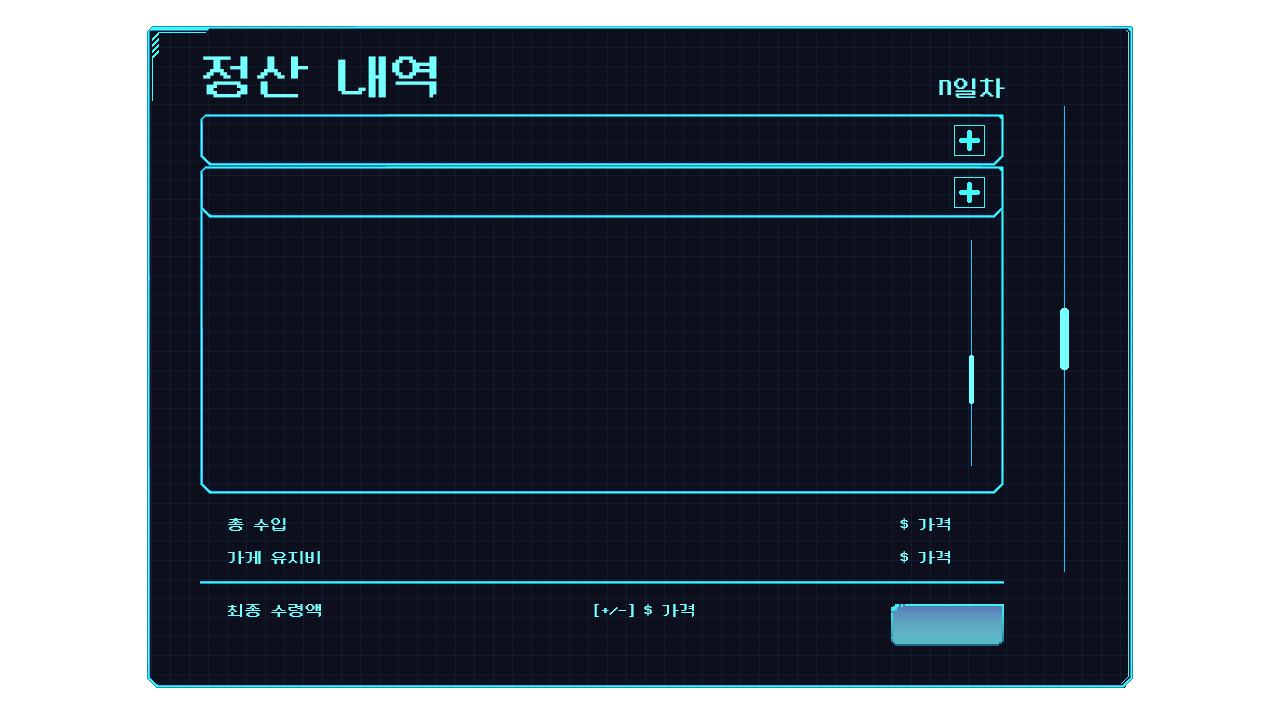
<style>
.page{position:relative;width:1280px;height:720px;background:#0d0f1d}
.page>*{position:absolute;margin:0}
.t1{font:50px "NeoDunggeunmo-Regular";color:#75fffe;scale:1.08 1}
.t2{font:24px "NeoDunggeunmo-Regular";color:#75fffe;scale:1.08 1}
.t3{font:16px "NeoDunggeunmo-Regular";color:#75fffe;scale:1.08 1}
</style>
<div class="page">
<p class="t1" style="left:203px;top:56px;width:234px;height:42px">정산 내역</p>
<p class="t2" style="left:939px;top:78px;width:66px;height:20px">N일차</p>
<p class="t3" style="left:228px;top:518px;width:58px;height:13px">총 수입</p>
<p class="t3" style="left:900px;top:518px;width:50px;height:13px">$ 가격</p>
<p class="t3" style="left:228px;top:551px;width:92px;height:13px">가게 유지비</p>
<p class="t3" style="left:900px;top:551px;width:50px;height:13px">$ 가격</p>
<p class="t3" style="left:228px;top:604px;width:93px;height:13px">최종 수령액</p>
<p class="t3" style="left:594px;top:604px;width:100px;height:13px">[+/-] $ 가격</p>
</div>
